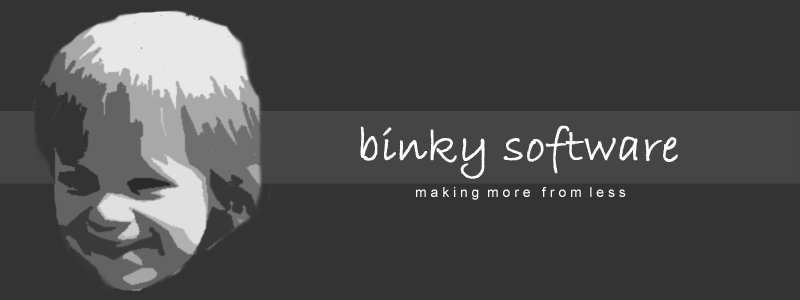
<style>
.page{position:relative;width:800px;height:300px;background:#333333}
.page>*{position:absolute;margin:0}
.t1{font:47.8px "BradleyHandITC";color:#ffffff;font-weight:bold}
.t2{font:13.9px "ArialMT";color:#ffffff}
</style>
<div class="page">
<p class="t1" style="left:360px;top:125px;width:318px;height:54px">binky software</p>
<p class="t2" style="left:416px;top:187px;width:210px;height:13px">m a k i n g  m o r e   f r o m  l e s s</p>
</div>
